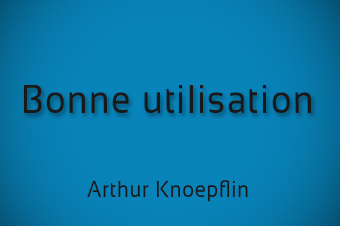
<style>
.page{position:relative;width:340px;height:226px}
.page>*{position:absolute;margin:0}
.t1{font:40.2px "Sansation-Regular";letter-spacing:0.04em;color:#191919;scale:0.87 1}
.t2{font:23px "Sansation-Regular";letter-spacing:0.04em;color:#191919;scale:0.87 1}
</style>
<div class="page">
<p class="t1" style="left:24px;top:85px;width:287px;height:28px">Bonne utilisation</p>
<p class="t2" style="left:87px;top:180px;width:161px;height:22px">Arthur Knoepflin</p>
</div>
